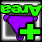
<style>
.page{position:relative;width:42px;height:42px}
.page>*{position:absolute;margin:0}
.t1{font:14.4px "Arial-Black";letter-spacing:-0.075em;color:#24ff00;scale:1.25 1}
.t2{font:28.8px "Arial-Black";letter-spacing:-0.075em;color:#24ff00;scale:1.3 1}
</style>
<div class="page">
<p class="t1" style="left:0px;top:5px;width:42px;height:11px;rotate:-180deg">Area</p>
<p class="t2" style="left:20px;top:24px;width:21px;height:16px;rotate:-180deg">+</p>
</div>
